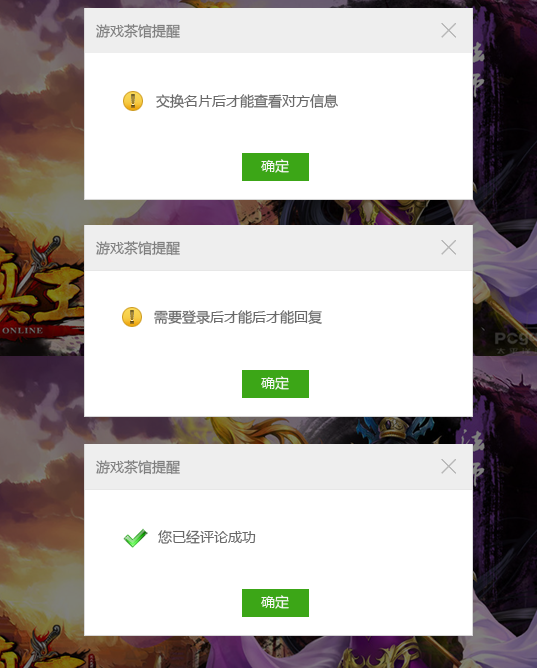
<style>
.page{position:relative;width:537px;height:668px;background:#ffffff}
.page>*{position:absolute;margin:0}
.t1{font:14px "MicrosoftYaHei";color:#7e7e7e}
.t2{font:14px "MicrosoftYaHei";color:#696969}
.t3{font:14px "MicrosoftYaHei";color:#f7f7f7}
</style>
<div class="page">
<p class="t1" style="left:96px;top:24px;width:84px;height:15px">游戏茶馆提醒</p>
<p class="t2" style="left:156px;top:94px;width:182px;height:15px">交换名片后才能查看对方信息</p>
<p class="t3" style="left:261px;top:159px;width:28px;height:14px">确定</p>
<p class="t1" style="left:96px;top:241px;width:84px;height:15px">游戏茶馆提醒</p>
<p class="t2" style="left:154px;top:310px;width:168px;height:15px">需要登录后才能后才能回复</p>
<p class="t3" style="left:261px;top:376px;width:28px;height:14px">确定</p>
<p class="t1" style="left:96px;top:460px;width:84px;height:15px">游戏茶馆提醒</p>
<p class="t2" style="left:158px;top:530px;width:98px;height:14px">您已经评论成功</p>
<p class="t3" style="left:261px;top:595px;width:28px;height:14px">确定</p>
</div>
